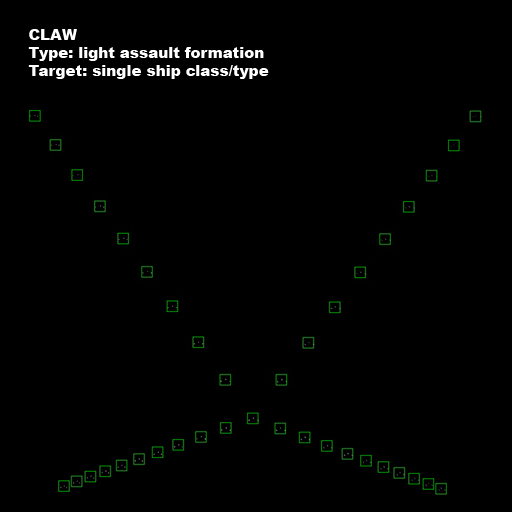
<style>
.page{position:relative;width:512px;height:512px;background:#000000}
.page>*{position:absolute;margin:0}
.t1{font:15px "Arial-Black";color:#ffffff}
</style>
<div class="page">
<p class="t1" style="left:28px;top:29px;width:241px;height:50px">CLAW<br>Type: light assault formation<br>Target: single ship class/type</p>
</div>
